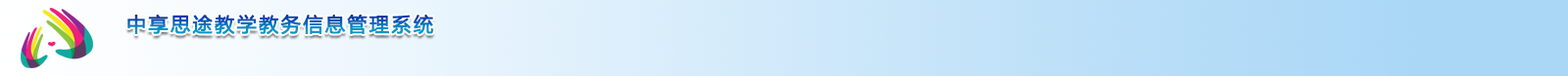
<style>
.page{position:relative;width:1568px;height:76px}
.page>*{position:absolute;margin:0}
.t1{font:19.6px "MicrosoftYaHei";letter-spacing:0.1em;font-weight:bold}
</style>
<div class="page">
<p class="t1" style="left:127px;top:14px;width:307px;height:21px">中享思途教学教务信息管理系统</p>
</div>
